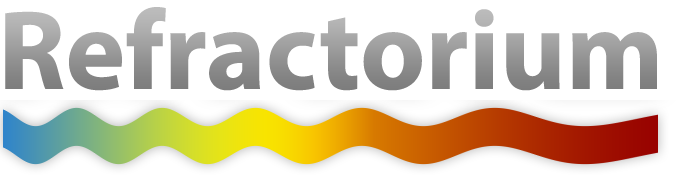
<style>
.page{position:relative;width:700px;height:180px;background:#ffffff}
.page>*{position:absolute;margin:0}
.t1{font:113.6px "MyriadPro-Bold";color:#a6a6a6}
</style>
<div class="page">
<p class="t1" style="left:5px;top:7px;width:652px;height:84px">Refractorium</p>
</div>
